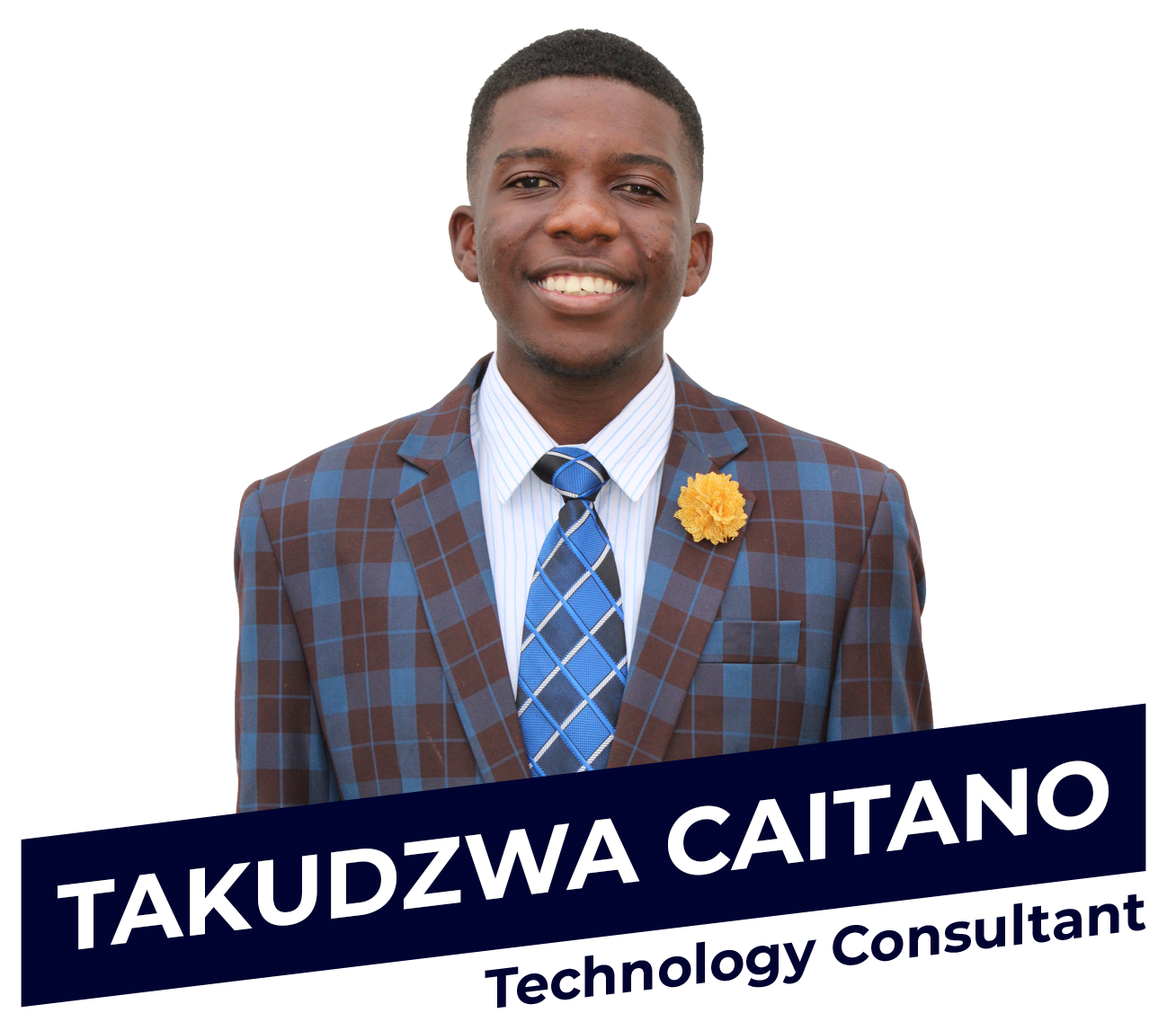
<style>
.page{position:relative;width:1167px;height:1022px;background:#ffffff}
.page>*{position:absolute;margin:0}
.t1{font:94.4px "Montserrat-Bold";color:#ffffff;text-transform:uppercase}
.t2{font:55.3px "Montserrat-Bold";color:#010431}
</style>
<div class="page">
<p class="t1" style="left:58px;top:760px;width:1050px;height:190px;rotate:-7deg">Takudzwa Caitano</p>
<p class="t2" style="left:484px;top:893px;width:662px;height:116px;rotate:-7deg">Technology Consultant</p>
</div>
